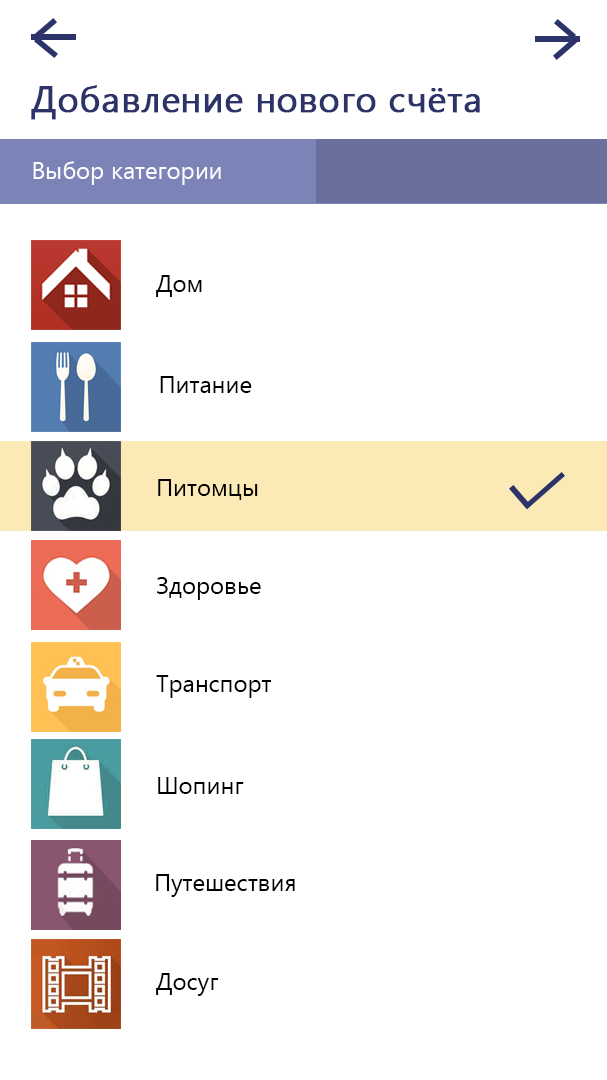
<style>
.page{position:relative;width:607px;height:1080px;background:#ffffff}
.page>*{position:absolute;margin:0}
.t1{font:36px "YuGothicUI-Regular";color:#2b3368;font-weight:bold}
.t2{font:24px "YuGothicUI-Regular";color:#fbfcff}
.t3{font:24px "YuGothicUI-Regular";color:#000000}
</style>
<div class="page">
<p class="t1" style="left:31px;top:85px;width:449px;height:35px">Добавление нового счёта</p>
<p class="t2" style="left:33px;top:161px;width:188px;height:24px">Выбор категории</p>
<p class="t3" style="left:156px;top:275px;width:46px;height:22px">Дом</p>
<p class="t3" style="left:160px;top:376px;width:92px;height:17px">Питание</p>
<p class="t3" style="left:158px;top:479px;width:100px;height:21px">Питомцы</p>
<p class="t3" style="left:157px;top:577px;width:104px;height:23px">Здоровье</p>
<p class="t3" style="left:156px;top:675px;width:116px;height:23px">Транспорт</p>
<p class="t3" style="left:158px;top:777px;width:86px;height:17px">Шопинг</p>
<p class="t3" style="left:156px;top:874px;width:139px;height:23px">Путешествия</p>
<p class="t3" style="left:156px;top:973px;width:63px;height:23px">Досуг</p>
</div>
